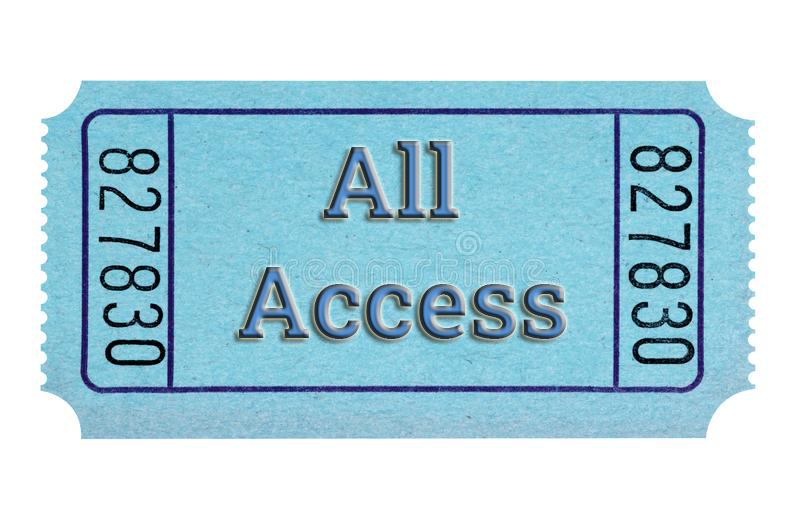
<style>
.page{position:relative;width:800px;height:531px;background:#ffffff}
.page>*{position:absolute;margin:0}
.t1{font:100px "RobotoSlab-Bold"}
</style>
<div class="page">
<p class="t1" style="left:239px;top:141px;width:328px;height:198px;text-align:center">All<br> Access</p>
</div>
